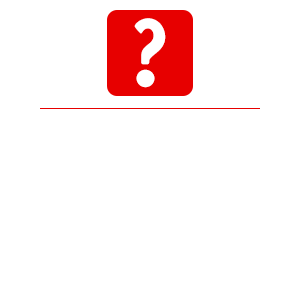
<style>
.page{position:relative;width:300px;height:300px;background:#ffffff}
.page>*{position:absolute;margin:0}
.t1{font:80px "HoboStd";color:#ffffff}
</style>
<div class="page">
<p class="t1" style="left:134px;top:18px;width:32px;height:70px">?</p>
</div>
